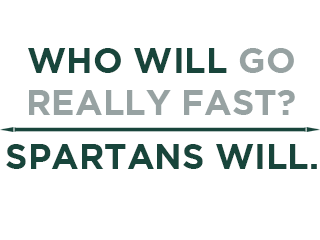
<style>
.page{position:relative;width:320px;height:240px;background:#ffffff}
.page>*{position:absolute;margin:0}
.t1{font:35px "Gotham-Bold";color:#97a2a2}
.t2{font:35px "Gotham-Bold";color:#18453b}
</style>
<div class="page">
<p class="t1" style="left:28px;top:48px;width:267px;height:67px;text-align:center"><span class="t2">WHO WILL </span>GO REALLY FAST?</p>
<p class="t2" style="left:6px;top:144px;width:311px;height:25px">SPARTANS WILL.</p>
</div>
